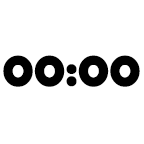
<style>
.page{position:relative;width:144px;height:144px;background:#ffffff}
.page>*{position:absolute;margin:0}
.t1{font:50px "BerlinSansFBDemi-Bold";color:#000000}
</style>
<div class="page">
<p class="t1" style="left:3px;top:55px;width:137px;height:32px">00:00</p>
</div>
